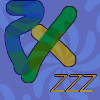
<style>
.page{position:relative;width:100px;height:100px}
.page>*{position:absolute;margin:0}
.t1{font:24px "TeXGyreHeros-Italic";color:#9f8530}
</style>
<div class="page">
<p class="t1" style="left:50px;top:74px;width:47px;height:18px">ZZZ</p>
</div>
